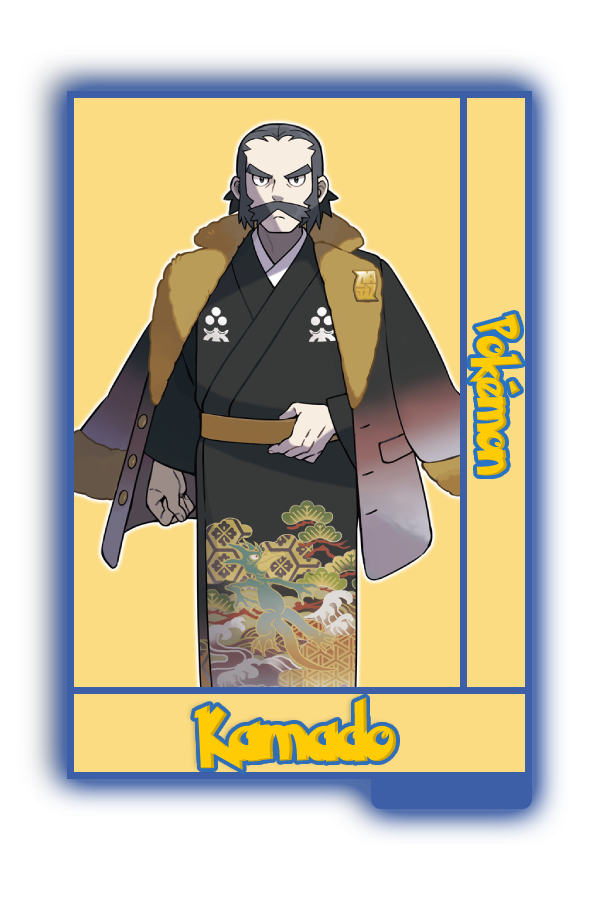
<style>
.page{position:relative;width:600px;height:900px;background:#fbdc83}
.page>*{position:absolute;margin:0}
.t1{font:48.8px "PokemonSolidNormal";color:#ffcb05;scale:0.8 1}
.t2{font:60.1px "PokemonSolidNormal";color:#ffcb05;scale:0.96 1}
</style>
<div class="page">
<p class="t1" style="left:469px;top:313px;width:54px;height:163px;rotate:90deg">Pokémon</p>
<p class="t2" style="left:194px;top:697px;width:203px;height:74px">Kamado</p>
</div>
